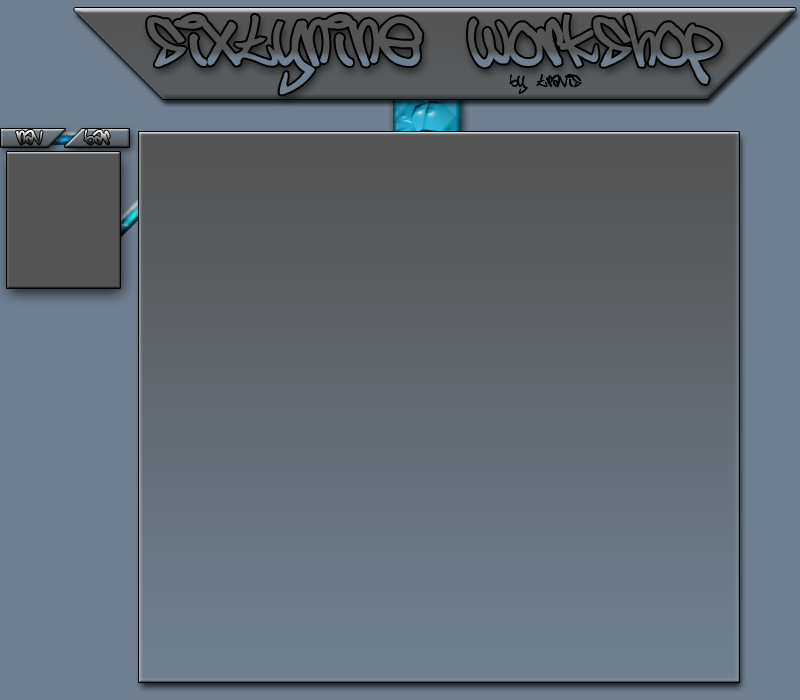
<style>
.page{position:relative;width:800px;height:700px;background:#708090}
.page>*{position:absolute;margin:0}
.t1{font:48px "5cent"}
.t2{font:12px "5cent";color:#000000}
</style>
<div class="page">
<p class="t1" style="left:147px;top:14px;width:575px;height:81px">sixtynine Workshop</p>
<p class="t2" style="left:509px;top:74px;width:73px;height:20px">by travis</p>
</div>
